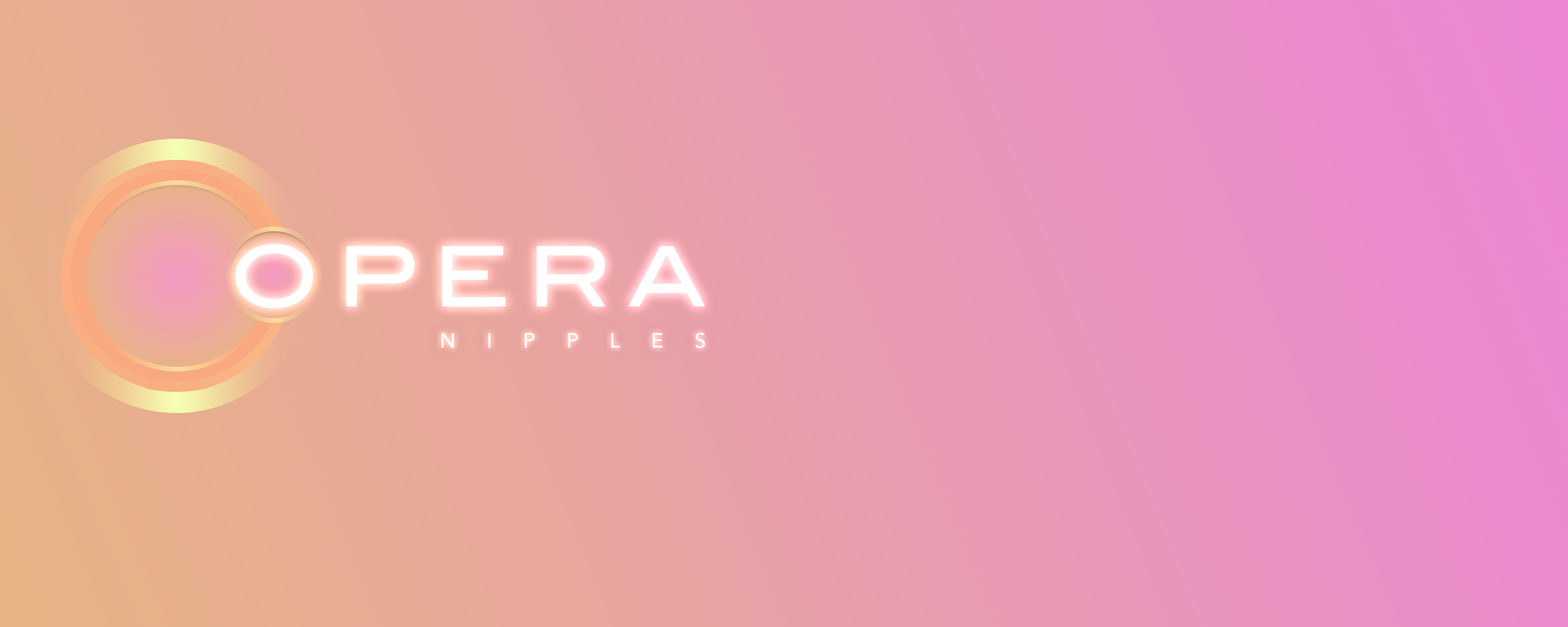
<style>
.page{position:relative;width:1568px;height:627px}
.page>*{position:absolute;margin:0}
.t1{font:83.1px "BlairMdITCTTMedium";letter-spacing:0.2em;color:#ffffff}
.t2{font:20.6px "AvenirNext-Medium";letter-spacing:1.5em;color:#ffffff}
</style>
<div class="page">
<p class="t1" style="left:235px;top:244px;width:470px;height:65px">OPERA</p>
<p class="t2" style="left:441px;top:332px;width:264px;height:16px">NIPPLES</p>
</div>
